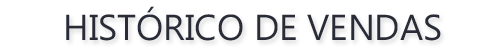
<style>
.page{position:relative;width:500px;height:52px;background:#ffffff}
.page>*{position:absolute;margin:0}
.t1{font:36px "MicrosoftPhagsPa";color:#292c37}
</style>
<div class="page">
<p class="t1" style="left:66px;top:6px;width:375px;height:35px">HISTÓRICO DE VENDAS</p>
</div>
